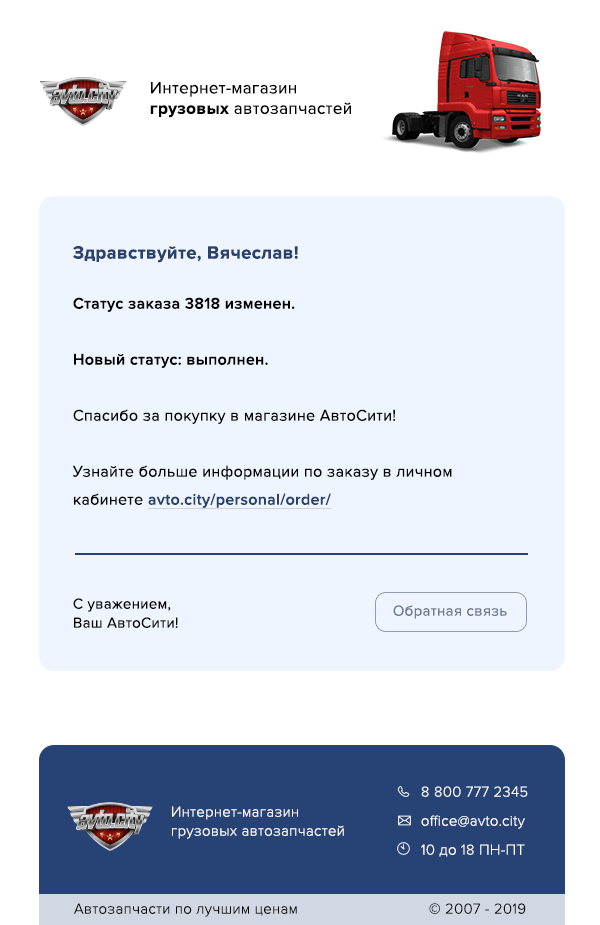
<style>
.page{position:relative;width:600px;height:925px;background:#eef5ff}
.page>*{position:absolute;margin:0}
.t1{font:17px "ProximaNova-Regular";letter-spacing:0.02em;color:#000000}
.t2{font:17px "ProximaNova-Bold";letter-spacing:0.02em;color:#000000}
.t3{font:18.4px "ProximaNova-Bold";letter-spacing:0.02em;color:#2a416c}
.t4{font:16px/28px "ProximaNova-Semibold";letter-spacing:0.02em;color:#000000}
.t5{font:16px/28px "ProximaNova-Regular";letter-spacing:0.02em;color:#000000}
.t6{font:16px/28px "ProximaNova-Semibold";letter-spacing:0.02em;color:#2a416c;text-decoration:underline}
.t7{font:15px/19px "ProximaNova-Regular";letter-spacing:0.02em;color:#000000}
.t8{font:15px "ProximaNova-Regular";letter-spacing:0.02em;color:#6d798d}
.t9{font:15px/29px "ProximaNova-Light";letter-spacing:0.02em;color:#ffffff}
.t10{font:15px/19px "ProximaNova-Light";letter-spacing:0.02em;color:#ffffff}
.t11{font:15px "ProximaNova-Light";letter-spacing:0.02em;color:#000000}
</style>
<div class="page">
<p class="t1" style="left:150px;top:82px;width:201px;height:36px">Интернет-магазин<br><span class="t2">грузовых </span>автозапчастей</p>
<p class="t3" style="left:73px;top:246px;width:225px;height:17px">Здравствуйте, Вячеслав!</p>
<p class="t4" style="left:73px;top:297px;width:222px;height:71px">Статус заказа 3818 изменен.<br><br>Новый статус: выполнен.</p>
<p class="t5" style="left:73px;top:409px;width:379px;height:100px">Спасибо за покупку в магазине АвтоСити!<br><br>Узнайте больше информации по заказу в личном кабинете <span class="t6">avto.city/personal/order/</span></p>
<p class="t7" style="left:73px;top:598px;width:105px;height:30px">С уважением,<br>Ваш АвтоСити!</p>
<p class="t8" style="left:393px;top:605px;width:114px;height:14px">Обратная связь</p>
<p class="t9" style="left:421px;top:786px;width:107px;height:71px">8 800 777 2345<br>office@avto.city<br>10 до 18 ПН-ПТ</p>
<p class="t10" style="left:172px;top:806px;width:172px;height:33px">Интернет-магазин<br>грузовых автозапчастей</p>
<p class="t11" style="left:74px;top:903px;width:223px;height:14px">Автозапчасти по лучшим ценам</p>
<p class="t11" style="left:429px;top:903px;width:97px;height:11px">© 2007 - 2019</p>
</div>
